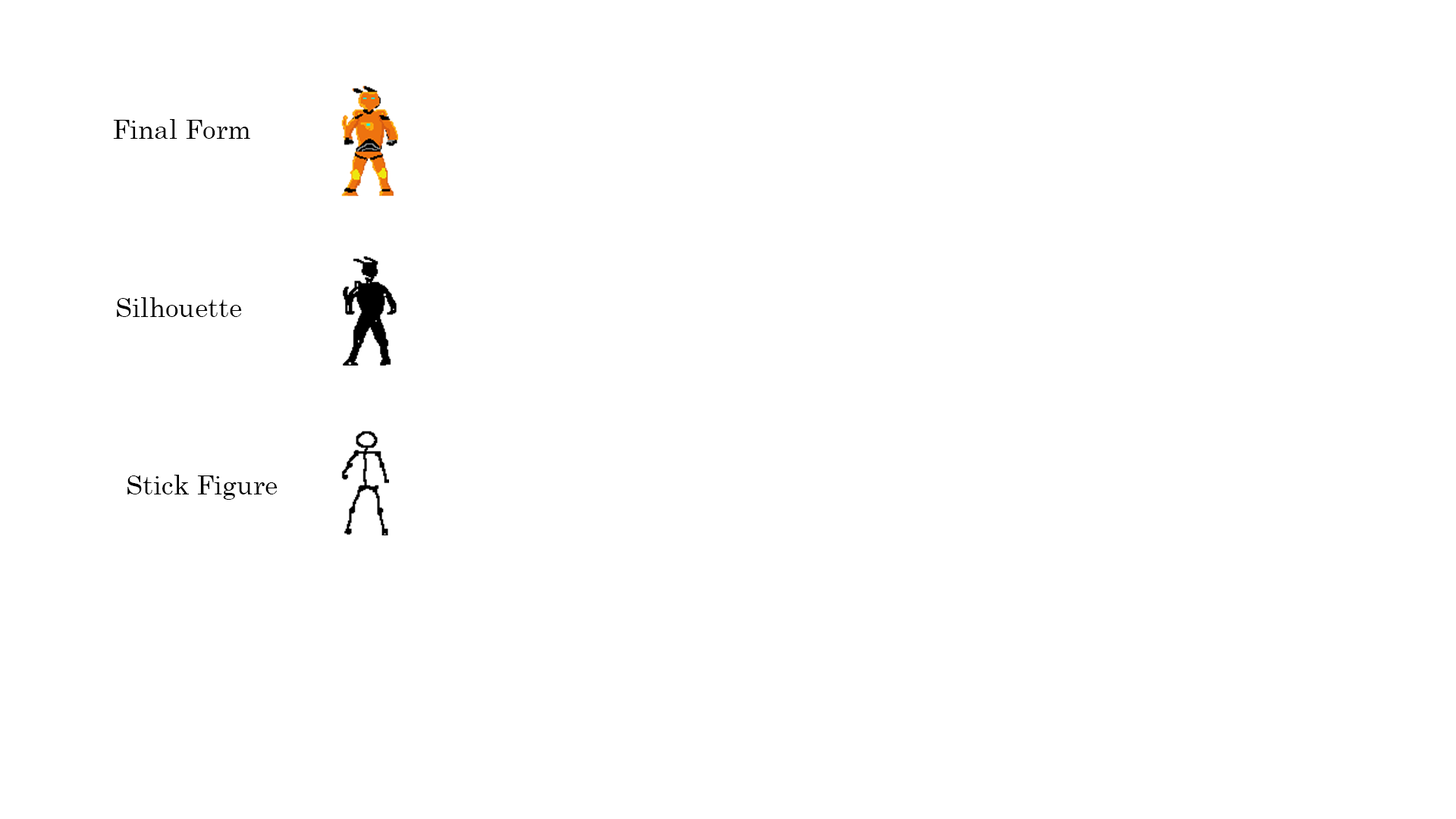
<style>
.page{position:relative;width:1456px;height:819px;background:#ffffff}
.page>*{position:absolute;margin:0}
.t1{font:26.5px "Century";color:#000000}
</style>
<div class="page">
<p class="t1" style="left:113px;top:119px;width:137px;height:20px">Final Form</p>
<p class="t1" style="left:117px;top:297px;width:125px;height:20px">Silhouette</p>
<p class="t1" style="left:127px;top:475px;width:151px;height:25px">Stick Figure</p>
</div>
